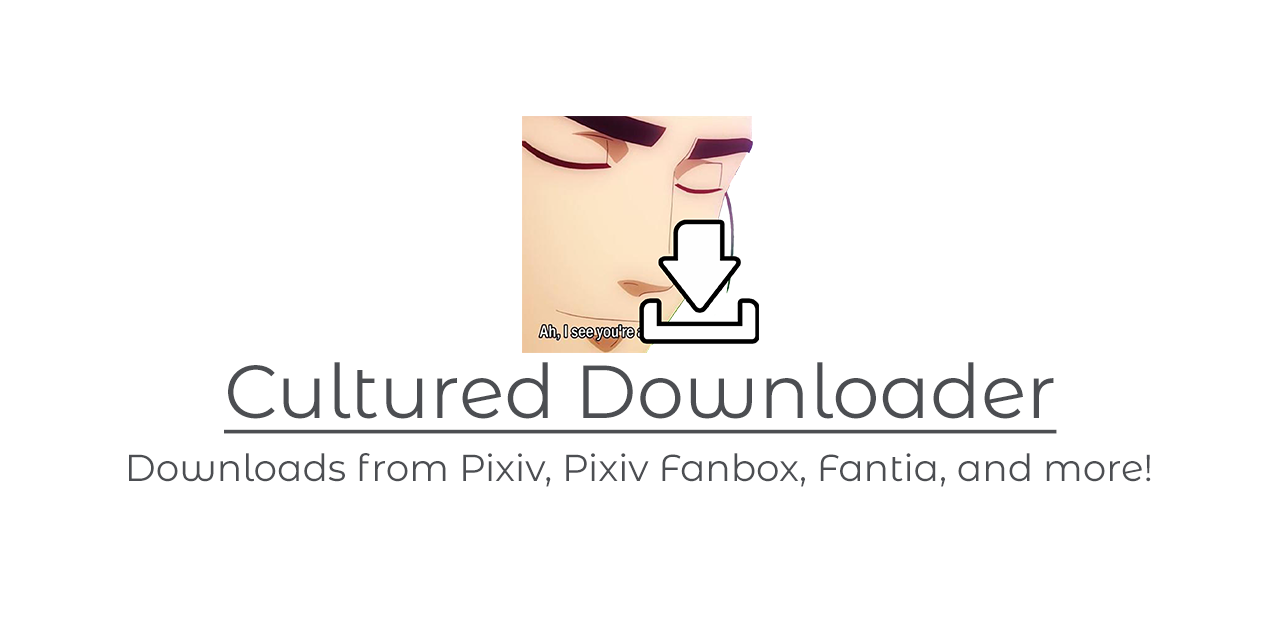
<style>
.page{position:relative;width:1280px;height:640px;background:#ffffff}
.page>*{position:absolute;margin:0}
.t1{font:75px "MontserratAlternates-Regular";color:#4c4e52;text-decoration:underline}
.t2{font:37.5px "MontserratAlternates-Regular";color:#4c4e52}
</style>
<div class="page">
<p class="t1" style="left:224px;top:362px;width:833px;height:72px">Cultured Downloader</p>
<p class="t2" style="left:129px;top:453px;width:1022px;height:34px">Downloads from Pixiv, Pixiv Fanbox, Fantia, and more!</p>
</div>
